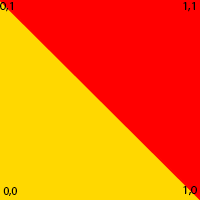
<style>
.page{position:relative;width:200px;height:200px;background:#ff0000}
.page>*{position:absolute;margin:0}
.t1{font:12px "MyriadPro-Regular";color:#000000}
.t2{font:11px "MyriadPro-Regular";color:#000000}
</style>
<div class="page">
<p class="t1" style="left:183px;top:2px;width:12px;height:10px">1,1</p>
<p class="t2" style="left:3px;top:187px;width:14px;height:9px">0,0</p>
<p class="t1" style="left:183px;top:186px;width:14px;height:10px">1,0</p>
</div>
